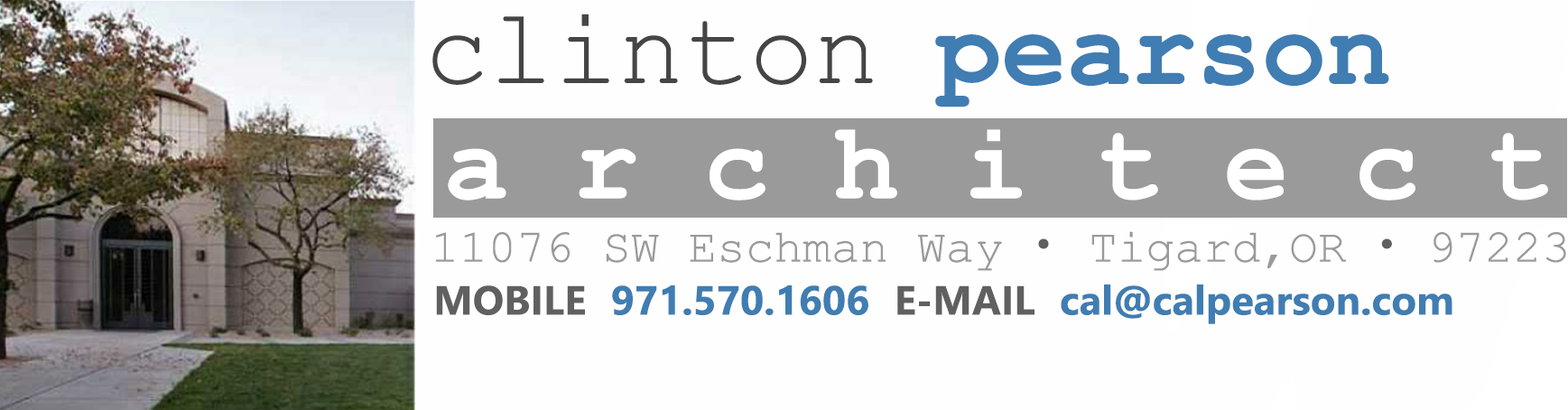
<style>
.page{position:relative;width:1568px;height:410px;background:#fefefe}
.page>*{position:absolute;margin:0}
.t1{font:108.3px "CourierNewPSMT";color:#454545}
.t2{font:108.3px "CourierNewPS-BoldMT";color:#407db2}
.t3{font:108.3px "CourierNewPS-BoldMT";color:#ffffff}
.t4{font:46.9px "CourierNewPSMT";color:#9a9a9a}
.t5{font:46.9px "KozGoPr6N-Regular";color:#606060}
.t6{font:40.7px "SegoeUI-Bold";color:#407db2}
.t7{font:40.7px "SegoeUI-Bold";color:#606060}
</style>
<div class="page">
<p class="t1" style="left:432px;top:14px;width:441px;height:71px">clinton</p>
<p class="t2" style="left:935px;top:34px;width:454px;height:73px">pearson</p>
<p class="t3" style="left:448px;top:129px;width:1100px;height:71px">a r c h i t e c t</p>
<p class="t4" style="left:435px;top:231px;width:1131px;height:40px">11076 SW Eschman Way <span class="t5">・   </span>Tigard,OR <span class="t5">・</span> 97223</p>
<p class="t6" style="left:436px;top:284px;width:1016px;height:40px"><span class="t7">MOBILE </span>971.570.1606 <span class="t7">E-MAIL </span>cal@calpearson.com</p>
</div>
